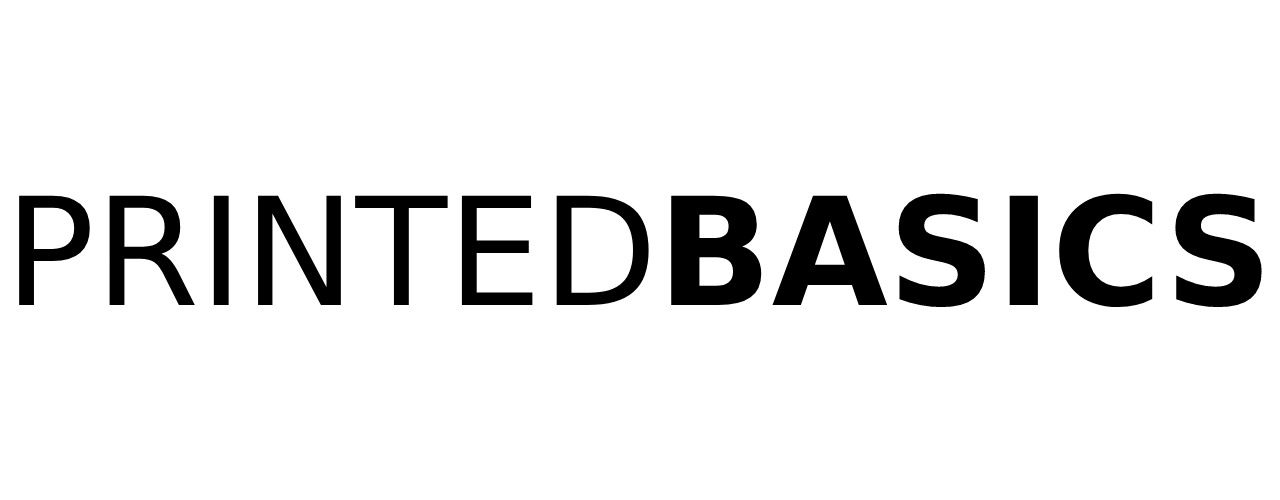
<style>
.page{position:relative;width:1280px;height:500px;background:#ffffff}
.page>*{position:absolute;margin:0}
.t1{font:150px "DejaVuSans";color:#000000}
.t2{font:150px "DejaVuSans-Bold";color:#000000}
</style>
<div class="page">
<p class="t1" style="left:19px;top:193px;width:1243px;height:115px">PRINTED<span class="t2">BASICS</span></p>
</div>
